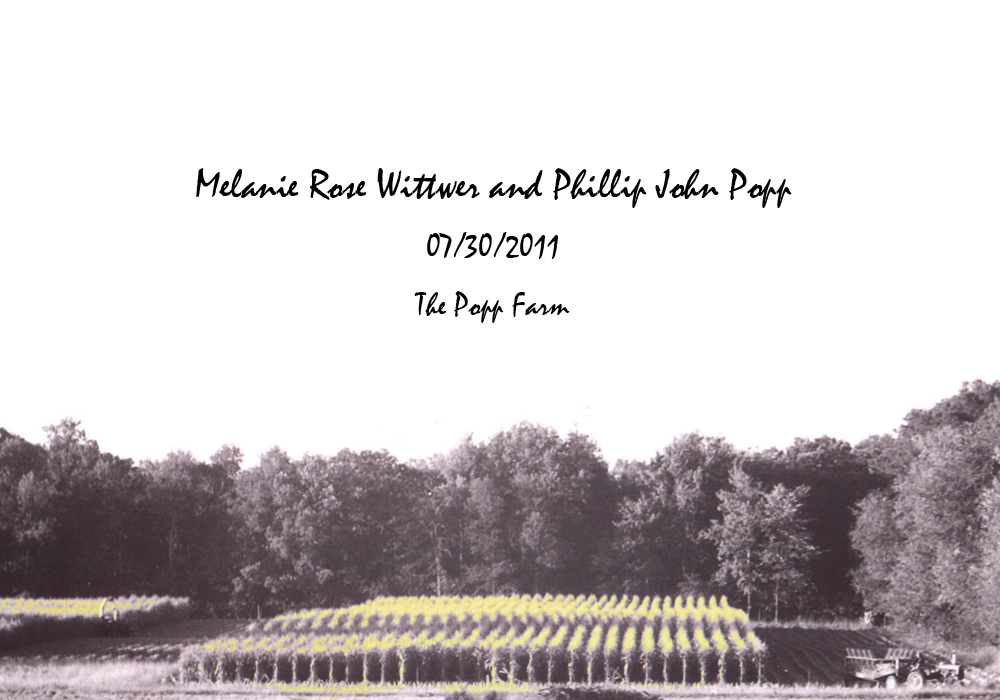
<style>
.page{position:relative;width:1000px;height:700px;background:#ffffff}
.page>*{position:absolute;margin:0}
.t1{font:41.7px/58.3px "Mistral";color:#000000}
.t2{font:33.3px/58.3px "Mistral";color:#000000}
</style>
<div class="page">
<p class="t1" style="left:196px;top:168px;width:596px;height:155px;text-align:center">Melanie Rose Wittwer and Phillip John Popp<br><span class="t2">07/30/2011<br>The Popp Farm</span></p>
</div>
